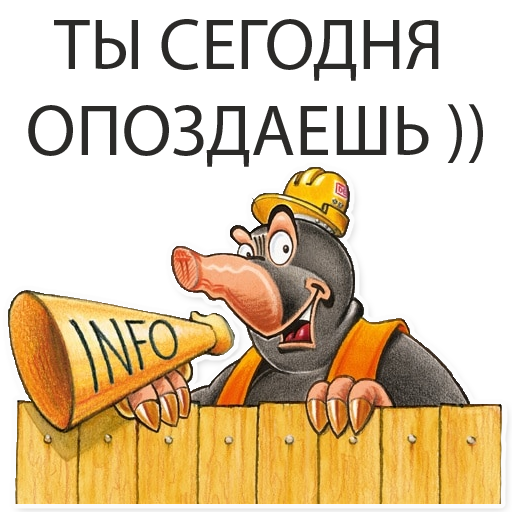
<style>
.page{position:relative;width:512px;height:512px;background:#ffffff}
.page>*{position:absolute;margin:0}
.t1{font:72px "MyriadPro-Regular";color:#2b2a28}
</style>
<div class="page">
<p class="t1" style="left:28px;top:19px;width:455px;height:148px;text-align:center">ТЫ СЕГОДНЯ <br>ОПОЗДАЕШЬ ))</p>
</div>
